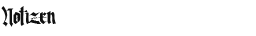
<style>
.page{position:relative;width:256px;height:36px;background:#ffffff}
.page>*{position:absolute;margin:0}
.t1{font:24px "Abuse";color:#101010}
</style>
<div class="page">
<p class="t1" style="left:1px;top:6px;width:55px;height:21px">Notizen</p>
</div>
